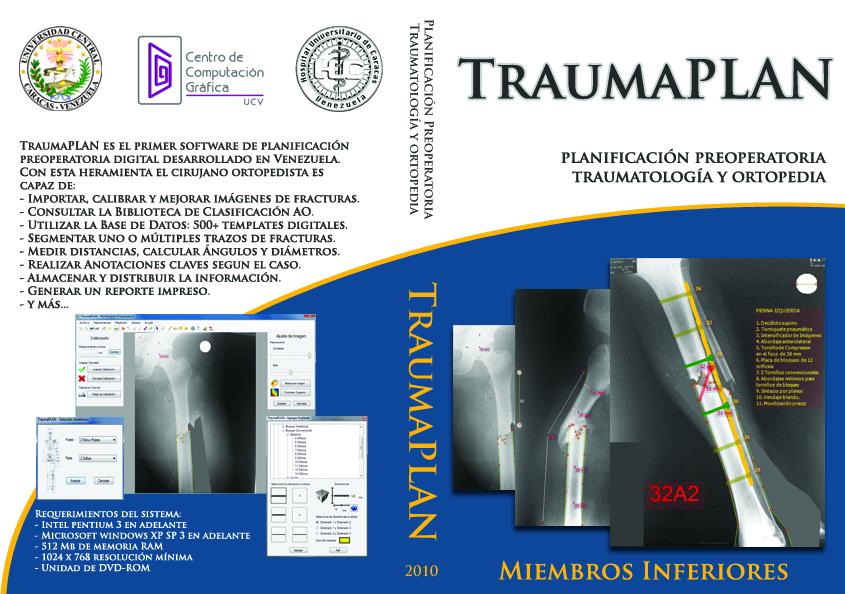
<style>
.page{position:relative;width:845px;height:594px;background:#ffffff}
.page>*{position:absolute;margin:0}
.t1{font:12px "TrajanPro-Bold";color:#202627}
.t2{font:52px "TrajanPro-Bold";color:#202627}
.t3{font:11px "TrajanPro-Bold";color:#202627}
.t4{font:16px "TrajanPro-Bold";color:#202627}
.t5{font:36px "TrajanPro-Bold";color:#feb303}
.t6{font:9px "TrajanPro-Bold";color:#ffffff}
.t7{font:14px "TrajanPro-Bold";color:#feb303}
.t8{font:24px "TrajanPro-Bold";color:#feb303}
</style>
<div class="page">
<p class="t1" style="left:410px;top:19px;width:26px;height:201px;text-align:center;rotate:90deg">Planificación Preoperatoria<br>Traumatología y ortopedia</p>
<p class="t2" style="left:458px;top:57px;width:375px;height:43px">TraumaPLAN</p>
<p class="t3" style="left:19px;top:140px;width:341px;height:169px">TraumaPLAN es el primer software de planificación <br>preoperatoria digital desarrollado en Venezuela. <br>Con esta heramienta el cirujano ortopedista es <br>capaz de:<br>- Importar, calibrar y mejorar imágenes de fracturas.<br>- Consultar la Biblioteca de Clasificación AO.<br>- Utilizar la Base de Datos: 500+ templates digitales.<br>- Segmentar uno o múltiples trazos de fracturas.<br>- Medir distancias, calcular Ángulos y diámetros.<br>- Realizar Anotaciones claves segun el caso.<br>- Almacenar y distribuir la información.<br>- Generar un reporte impreso.<br>- y más...</p>
<p class="t4" style="left:561px;top:148px;width:266px;height:35px;text-align:right">planificación preoperatoria<br>traumatología y ortopedia</p>
<p class="t5" style="left:408px;top:282px;width:29px;height:259px;rotate:90deg">TraumaPLAN</p>
<p class="t6" style="left:35px;top:510px;width:215px;height:62px">Requerimientos del sistema:<br>- Intel pentium 3 en adelante<br>- Microsoft windows XP SP 3 en adelante<br>- 512 Mb de memoria RAM<br>- 1024 x 768 resolución mínima<br>- Unidad de DVD-ROM</p>
<p class="t7" style="left:405px;top:565px;width:33px;height:12px">2010</p>
<p class="t8" style="left:498px;top:560px;width:290px;height:20px">Miembros Inferiores</p>
</div>
